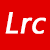
<style>
.page{position:relative;width:50px;height:50px;background:#e20000}
.page>*{position:absolute;margin:0}
.t1{font:30px "SegoeUI";color:#ffffff;font-weight:bold;font-style:italic}
</style>
<div class="page">
<p class="t1" style="left:5px;top:12px;width:41px;height:22px">Lrc</p>
</div>
